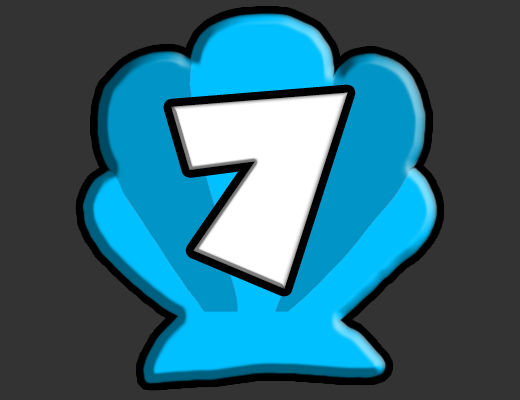
<style>
.page{position:relative;width:520px;height:400px;background:#333333}
.page>*{position:absolute;margin:0}
.t1{font:279.4px "Funhouse";color:#ffffff}
</style>
<div class="page">
<p class="t1" style="left:171px;top:92px;width:177px;height:197px">7</p>
</div>
